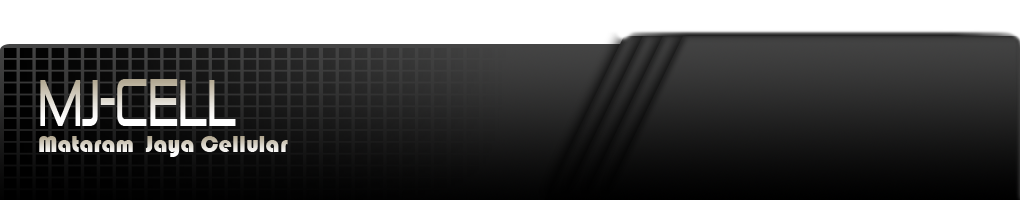
<style>
.page{position:relative;width:1020px;height:200px}
.page>*{position:absolute;margin:0}
.t1{font:66.2px "PirulenRg-Regular";scale:0.55 1}
.t2{font:24px "Bauhaus93"}
</style>
<div class="page">
<p class="t1" style="left:40px;top:79px;width:196px;height:47px">MJ-Cell</p>
<p class="t2" style="left:39px;top:136px;width:249px;height:21px">Mataram  Jaya Cellular</p>
</div>
